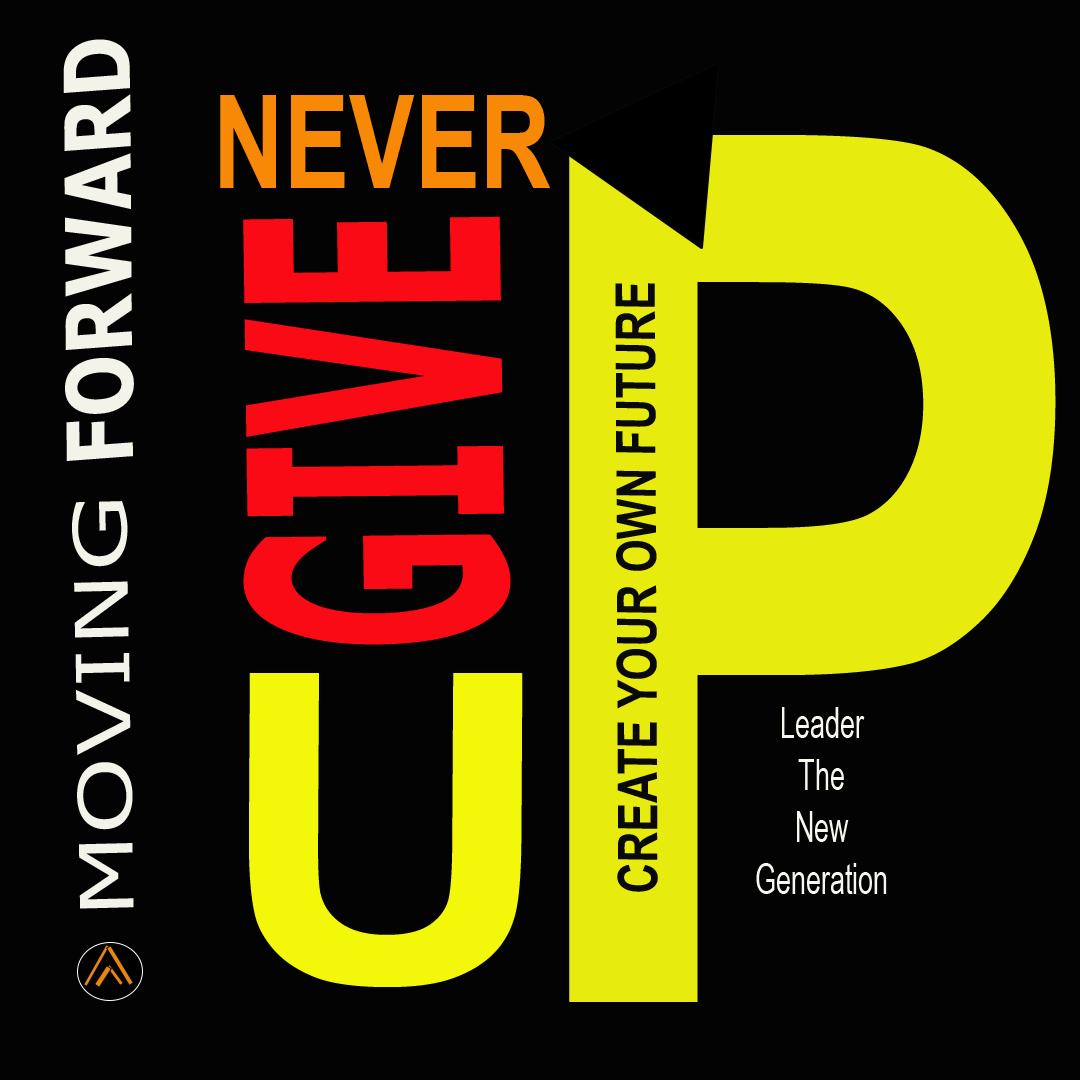
<style>
.page{position:relative;width:1080px;height:1080px;background:#040303}
.page>*{position:absolute;margin:0}
.t1{font:91.2px "Verdana-Bold";color:#f3f3ea;scale:0.81 1}
.t2{font:129.8px "Arial-BoldMT";color:#f78907;scale:0.76 1}
.t3{font:1211.2px "Arial-BoldMT";color:#e8ec0e;scale:0.73 1}
.t4{font:352.5px "Verdana-Bold";color:#fa0a15;scale:0.45 1}
.t5{font:54.7px "Arial-BoldMT";color:#090909;scale:0.79 1}
.t6{font:73.7px "Verdana";color:#f3f3ea;scale:1.35 1}
.t7{font:429.5px "Arial-BoldMT";color:#f3f709;scale:1.11 1}
.t8{font:43.3px "ArialNarrow";color:#f8f8f0;scale:0.76 1}
</style>
<div class="page">
<p class="t1" style="left:63px;top:39px;width:71px;height:422px;rotate:-90deg">FORWARD</p>
<p class="t2" style="left:220px;top:95px;width:331px;height:93px">NEVER</p>
<p class="t3" style="left:569px;top:135px;width:487px;height:867px">P</p>
<p class="t4" style="left:243px;top:216px;width:268px;height:429px;rotate:-91deg">GIVE</p>
<p class="t5" style="left:615px;top:283px;width:43px;height:609px;rotate:-90deg">CREATE YOUR OWN FUTURE</p>
<p class="t6" style="left:72px;top:501px;width:62px;height:408px;rotate:-91deg">MOVING</p>
<p class="t7" style="left:249px;top:673px;width:274px;height:314px">U</p>
<p class="t8" style="left:756px;top:707px;width:131px;height:187px;text-align:center">Leader<br>The<br>New<br>Generation</p>
</div>
